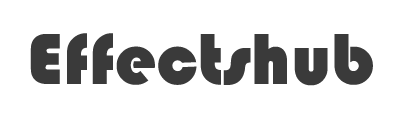
<style>
.page{position:relative;width:400px;height:116px;background:#ffffff}
.page>*{position:absolute;margin:0}
.t1{font:75px "Bauhaus93";color:#3a3a3a}
</style>
<div class="page">
<p class="t1" style="left:30px;top:33px;width:343px;height:53px">Effectshub</p>
</div>
